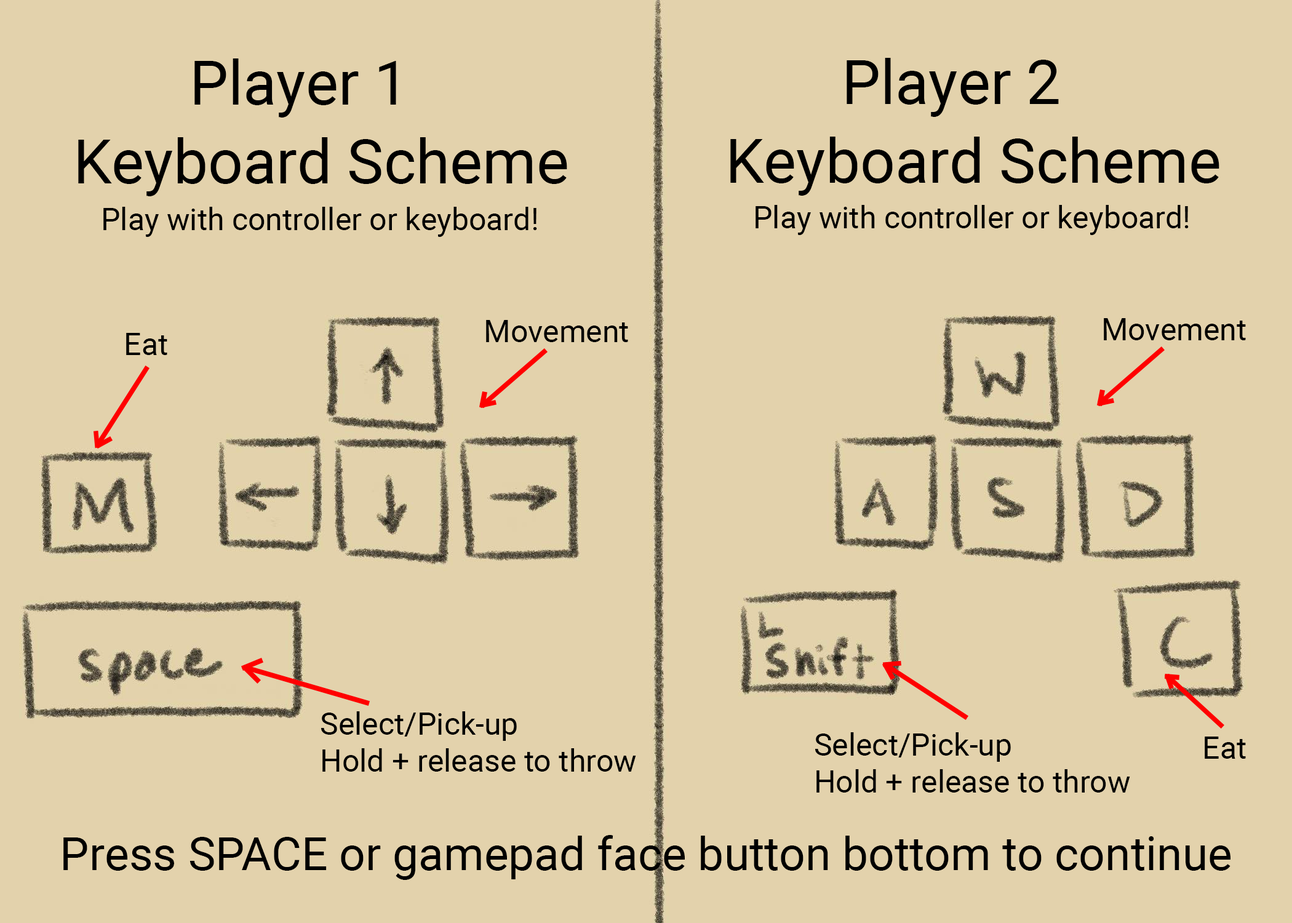
<style>
.page{position:relative;width:1292px;height:923px;background:#e3d2ac}
.page>*{position:absolute;margin:0}
.t1{font:61.5px "Roboto-Regular";color:#000000}
.t2{font:30.8px "Roboto-Regular";color:#000000}
.t3{font:46.1px "Roboto-Regular";color:#000000}
</style>
<div class="page">
<p class="t1" style="left:194px;top:58px;width:202px;height:60px">Player 1</p>
<p class="t1" style="left:847px;top:58px;width:212px;height:59px">Player 2</p>
<p class="t1" style="left:78px;top:137px;width:489px;height:59px">Keyboard Scheme</p>
<p class="t1" style="left:730px;top:137px;width:489px;height:59px">Keyboard Scheme</p>
<p class="t2" style="left:103px;top:207px;width:434px;height:30px">Play with controller or keyboard!</p>
<p class="t2" style="left:756px;top:205px;width:433px;height:30px">Play with controller or keyboard!</p>
<p class="t2" style="left:486px;top:320px;width:142px;height:22px">Movement</p>
<p class="t2" style="left:1104px;top:318px;width:142px;height:22px">Movement</p>
<p class="t2" style="left:126px;top:333px;width:41px;height:22px">Eat</p>
<p class="t2" style="left:321px;top:711px;width:315px;height:61px">Select/Pick-up<br>Hold + release to throw</p>
<p class="t2" style="left:815px;top:732px;width:315px;height:60px">Select/Pick-up<br>Hold + release to throw</p>
<p class="t2" style="left:1205px;top:736px;width:41px;height:23px">Eat</p>
<p class="t3" style="left:63px;top:835px;width:1168px;height:45px">Press SPACE or gamepad face button bottom to continue</p>
</div>
